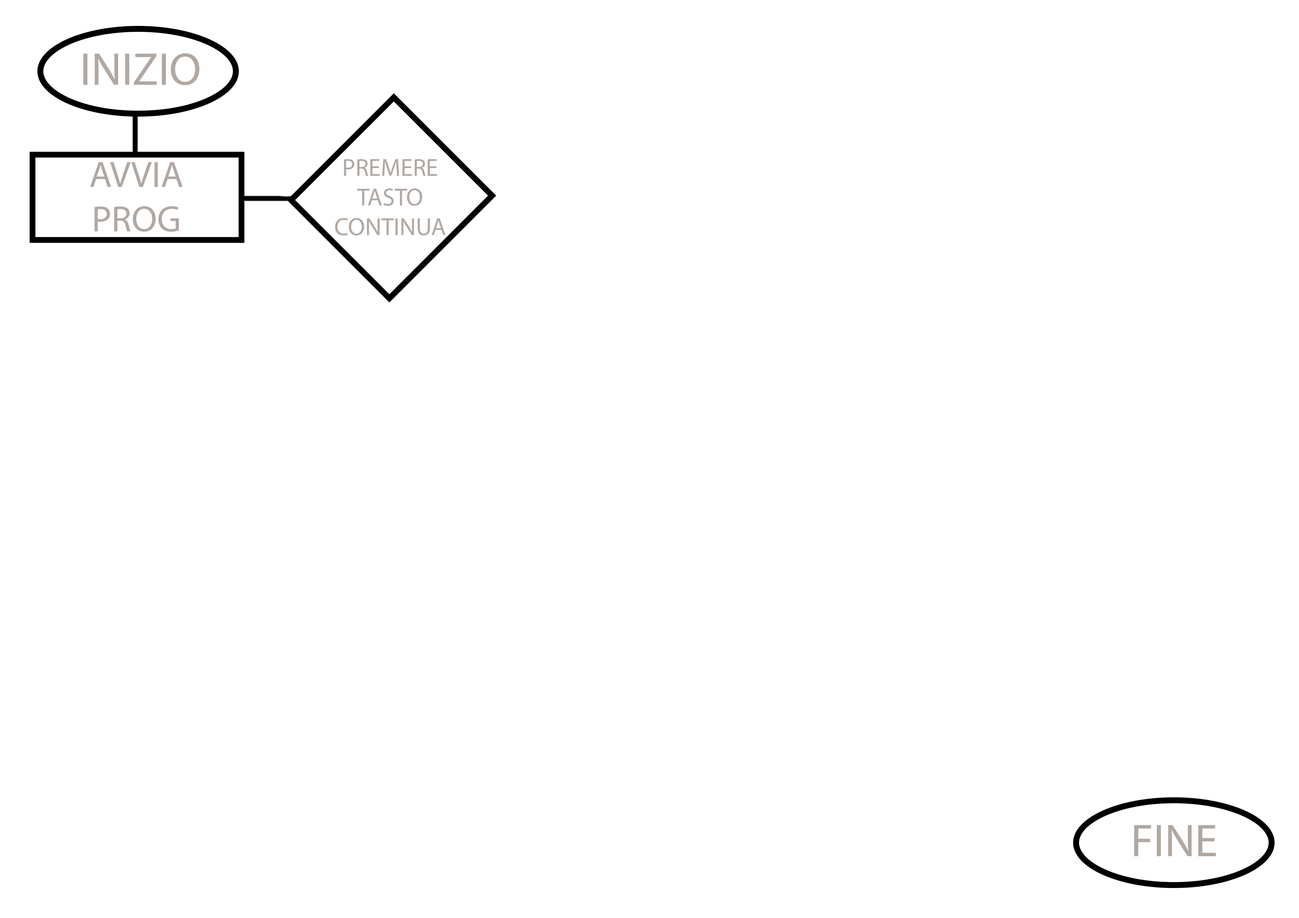
<style>
.page{position:relative;width:1299px;height:918px;background:#ffffff}
.page>*{position:absolute;margin:0}
.t1{font:46.3px "MyriadPro-Regular";color:#b0a8a3}
.t2{font:24.7px "MyriadPro-Regular";color:#b0a8a3}
.t3{font:37px "MyriadPro-Regular";color:#b0a8a3}
</style>
<div class="page">
<p class="t1" style="left:83px;top:53px;width:117px;height:33px">INIZIO</p>
<p class="t2" style="left:335px;top:159px;width:110px;height:76px;text-align:center">PREMERE TASTO CONTINUA</p>
<p class="t3" style="left:90px;top:162px;width:93px;height:70px;text-align:center">AVVIA <br>PROG</p>
<p class="t1" style="left:1134px;top:825px;width:82px;height:32px">FINE</p>
</div>
